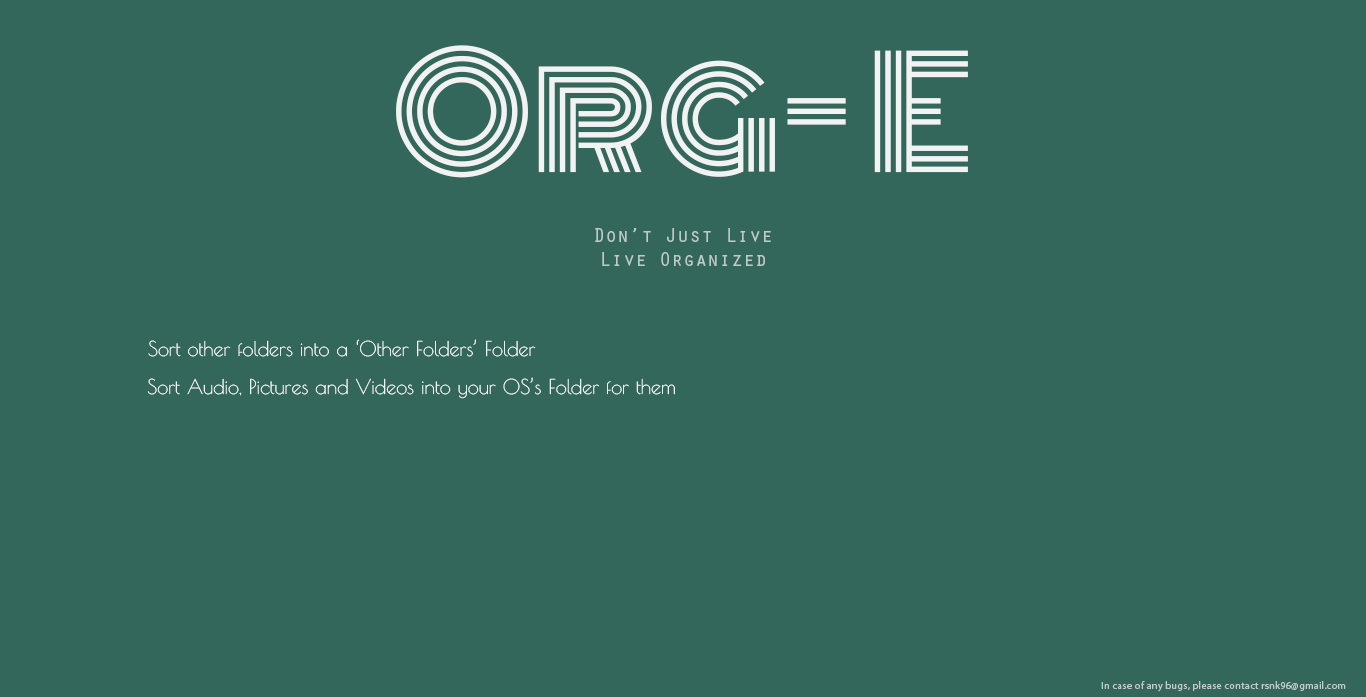
<style>
.page{position:relative;width:1366px;height:697px;background:#34675c}
.page>*{position:absolute;margin:0}
.t1{font:150px "Monoton-Regular";color:#ffffff}
.t2{font:20px "OratorStd";color:#bfcbc8}
.t3{font:20px "PoiretOne-Regular";color:#ffffff}
.t4{font:10px "MyriadPro-Regular";letter-spacing:0.04em;color:#bfcbc8}
</style>
<div class="page">
<p class="t1" style="left:396px;top:45px;width:572px;height:133px;opacity:0.9">Org- E</p>
<p class="t2" style="left:595px;top:228px;width:176px;height:38px;text-align:center">Don’t Just Live<br>Live Organized</p>
<p class="t3" style="left:148px;top:339px;width:388px;height:18px">Sort other folders into a ‘Other Folders’ Folder</p>
<p class="t3" style="left:147px;top:377px;width:528px;height:22px">Sort Audio, Pictures and Videos into your OS’s Folder for them</p>
<p class="t4" style="left:1101px;top:681px;width:245px;height:11px">In case of any bugs, please contact rsnk96@gmail.com</p>
</div>
